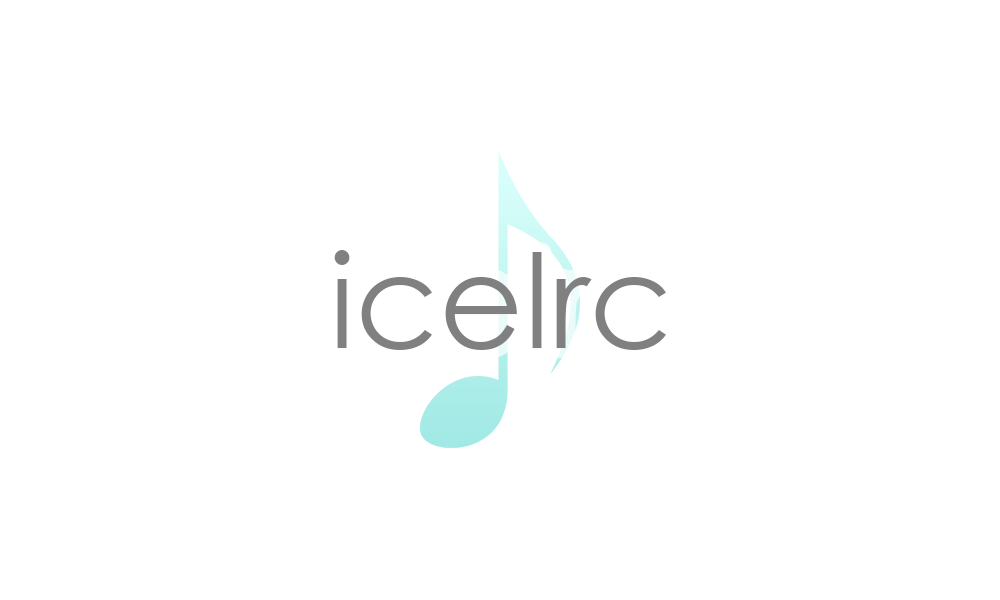
<style>
.page{position:relative;width:1000px;height:600px;background:#ffffff}
.page>*{position:absolute;margin:0}
.t1{font:130px "CenturyGothic";color:#808080}
</style>
<div class="page">
<p class="t1" style="left:334px;top:250px;width:332px;height:100px">icelrc</p>
</div>
